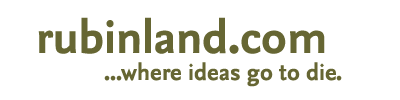
<style>
.page{position:relative;width:400px;height:100px;background:#ffffff}
.page>*{position:absolute;margin:0}
.t1{font:48px "NexusSans-Bold";color:#666633}
.t2{font:24px "NexusSans-Bold";color:#666633}
</style>
<div class="page">
<p class="t1" style="left:38px;top:17px;width:287px;height:37px">rubinland.com</p>
<p class="t2" style="left:104px;top:62px;width:238px;height:25px">...where ideas go to die.</p>
</div>
